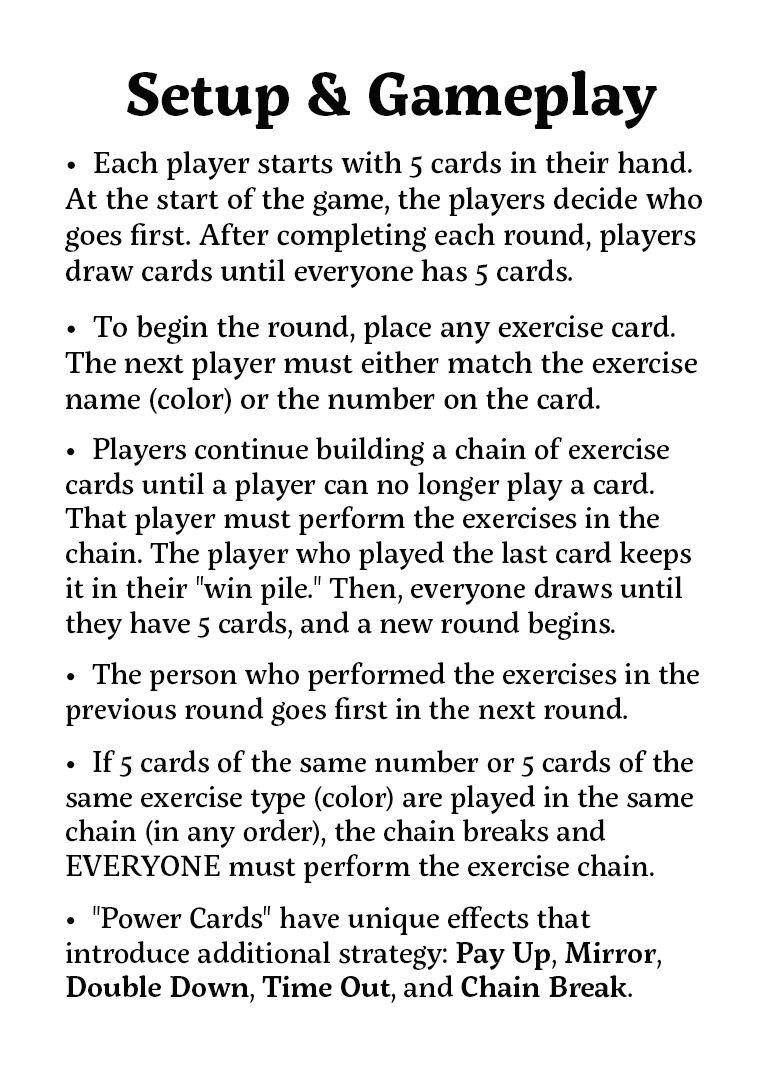
<style>
.page{position:relative;width:784px;height:1066px;background:#ffffff}
.page>*{position:absolute;margin:0}
.t1{font:60px "ServusSlab-Bold";color:#060606}
.t2{font:30px "ServusSlab-Medium";color:#060606}
.t3{font:29px "ServusSlab-Medium";color:#060606}
.t4{font:29px "ServusSlab-SemiBold";color:#060606}
</style>
<div class="page">
<p class="t1" style="left:127px;top:70px;width:530px;height:59px">Setup &amp; Gameplay</p>
<p class="t2" style="left:65px;top:151px;width:637px;height:137px">•  Each player starts with 5 cards in their hand. At the start of the game, the players decide who goes first. After completing each round, players draw cards until everyone has 5 cards.</p>
<p class="t2" style="left:65px;top:315px;width:632px;height:99px">•  To begin the round, place any exercise card. The next player must either match the exercise name (color) or the number on the card.</p>
<p class="t3" style="left:65px;top:437px;width:626px;height:203px">•  Players continue building a chain of exercise cards until a player can no longer play a card. That player must perform the exercises in the chain. The player who played the last card keeps it in their "win pile." Then, everyone draws until they have 5 cards, and a new round begins.</p>
<p class="t3" style="left:66px;top:662px;width:633px;height:64px">•  The person who performed the exercises in the previous round goes first in the next round.</p>
<p class="t3" style="left:66px;top:750px;width:627px;height:133px">•  If 5 cards of the same number or 5 cards of the same exercise type (color) are played in the same chain (in any order), the chain breaks and EVERYONE must perform the exercise chain.</p>
<p class="t3" style="left:66px;top:906px;width:595px;height:97px">•  "Power Cards" have unique effects that introduce additional strategy: <span class="t4">Pay Up</span>, <span class="t4">Mirror</span>, <span class="t4">Double Down</span>, <span class="t4">Time Out</span>, and <span class="t4">Chain Break</span>.</p>
</div>
